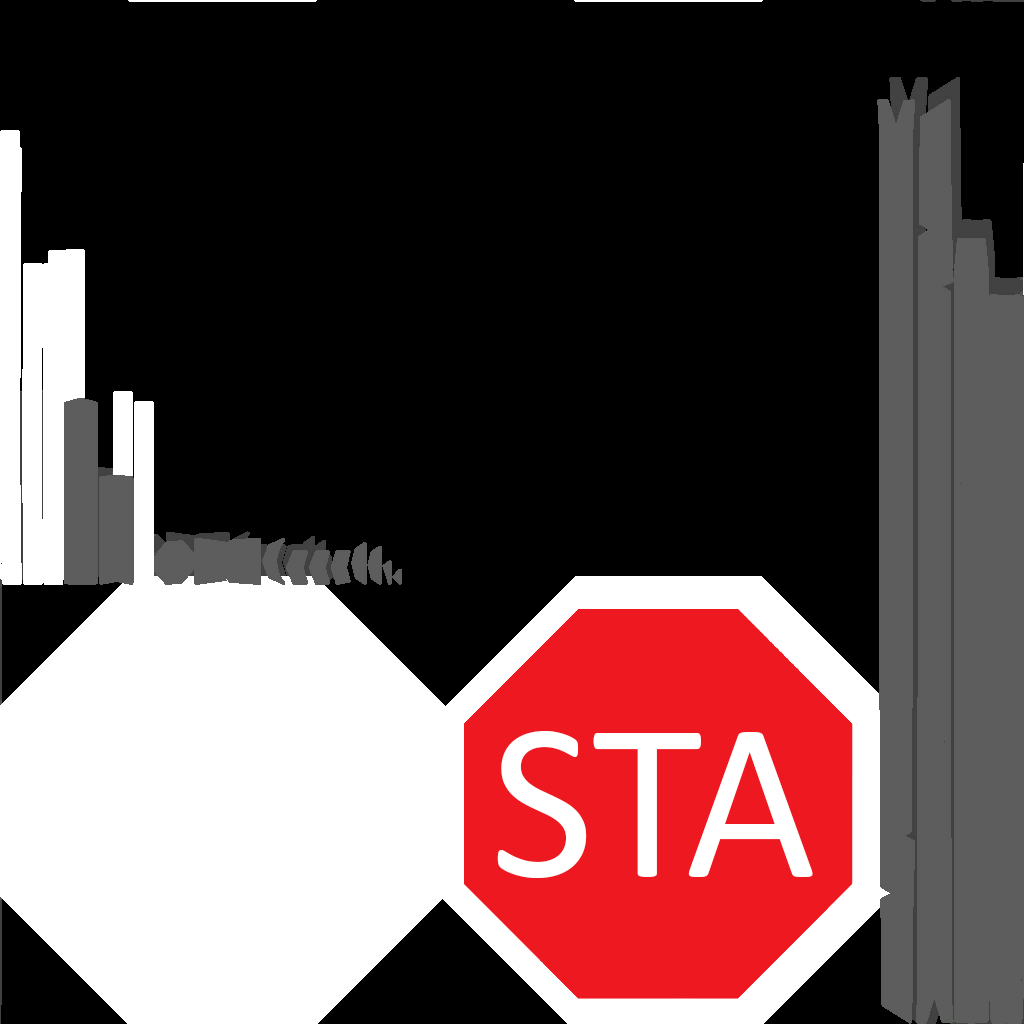
<style>
.page{position:relative;width:1024px;height:1024px;background:#000000}
.page>*{position:absolute;margin:0}
.t1{font:226.7px "Calibri";color:#ffffff}
</style>
<div class="page">
<p class="t1" style="left:497px;top:731px;width:316px;height:147px">STA</p>
</div>
